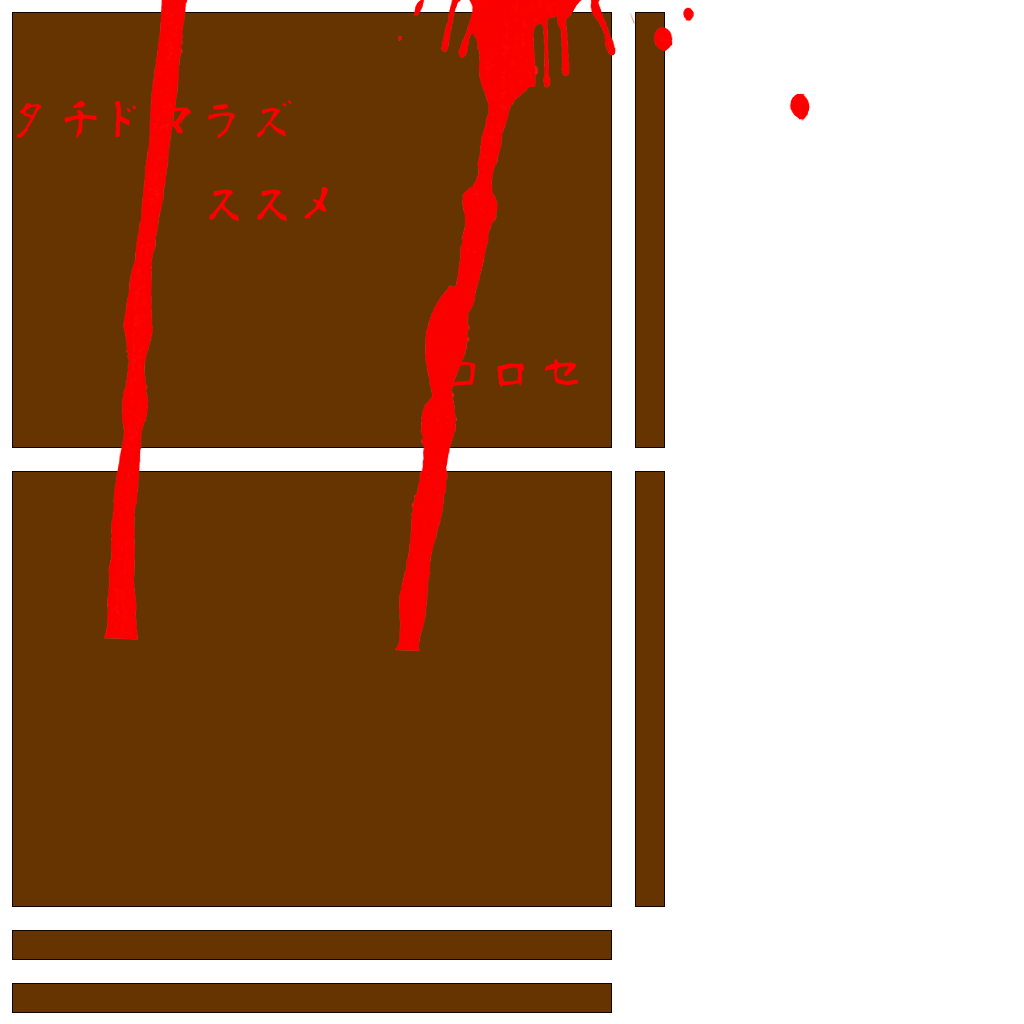
<style>
.page{position:relative;width:1024px;height:1024px;background:#653400}
.page>*{position:absolute;margin:0}
.t1{font:48px "aoyagireisyosimo2";color:#ff0000}
.t2{font:48px "DFKaiShu-SB-Estd-BF";color:#ff0000}
</style>
<div class="page">
<p class="t1" style="left:16px;top:100px;width:562px;height:288px"><span class="t2"><br></span>タチドマラズ<br>　　　　ススメ<br><br>　　　　　　　　　コロセ</p>
</div>
